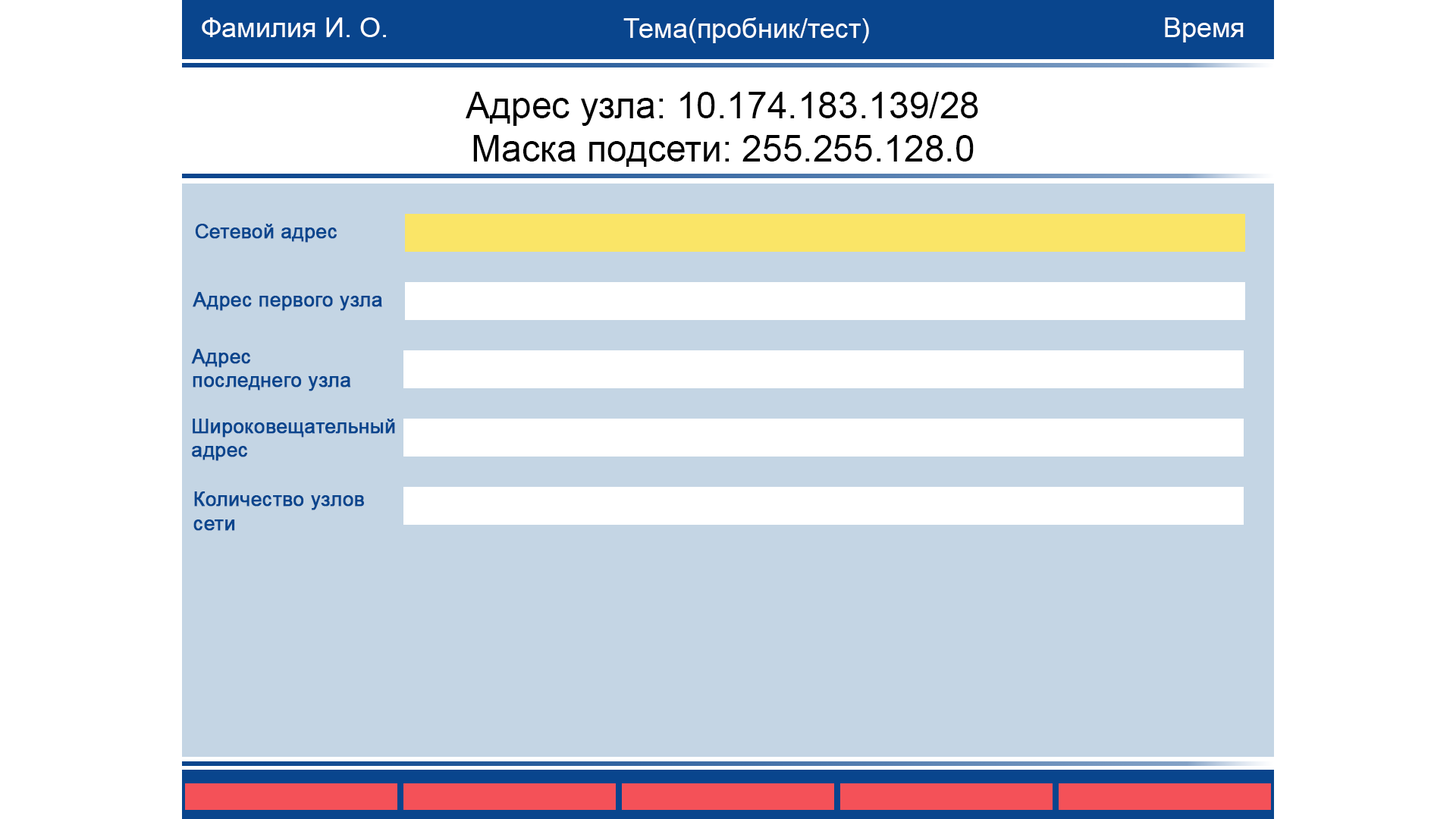
<style>
.page{position:relative;width:1456px;height:819px;background:#ffffff}
.page>*{position:absolute;margin:0}
.t1{font:27.3px "ArialMT";color:#ffffff}
.t2{font:27.3px "ArialMT";color:#fefefe}
.t3{font:36.4px "ArialMT";color:#010101}
.t4{font:19.7px "ArialMT";color:#09458d;font-weight:bold}
</style>
<div class="page">
<p class="t1" style="left:202px;top:17px;width:184px;height:20px">Фамилия И. О.</p>
<p class="t2" style="left:623px;top:17px;width:246px;height:26px">Тема(пробник/тест)</p>
<p class="t1" style="left:1165px;top:17px;width:79px;height:25px">Время</p>
<p class="t3" style="left:466px;top:92px;width:512px;height:75px;text-align:center">Адрес узла: 10.174.183.139/28<br>Маска подсети: 255.255.128.0</p>
<p class="t4" style="left:195px;top:224px;width:142px;height:19px">Сетевой адрес</p>
<p class="t4" style="left:193px;top:292px;width:189px;height:19px">Адрес первого узла</p>
<p class="t4" style="left:191px;top:349px;width:160px;height:42px">Адрес <br>последнего узла</p>
<p class="t4" style="left:192px;top:419px;width:203px;height:42px">Широковещательный<br>адрес</p>
<p class="t4" style="left:193px;top:491px;width:171px;height:40px">Количество узлов<br>сети</p>
</div>
